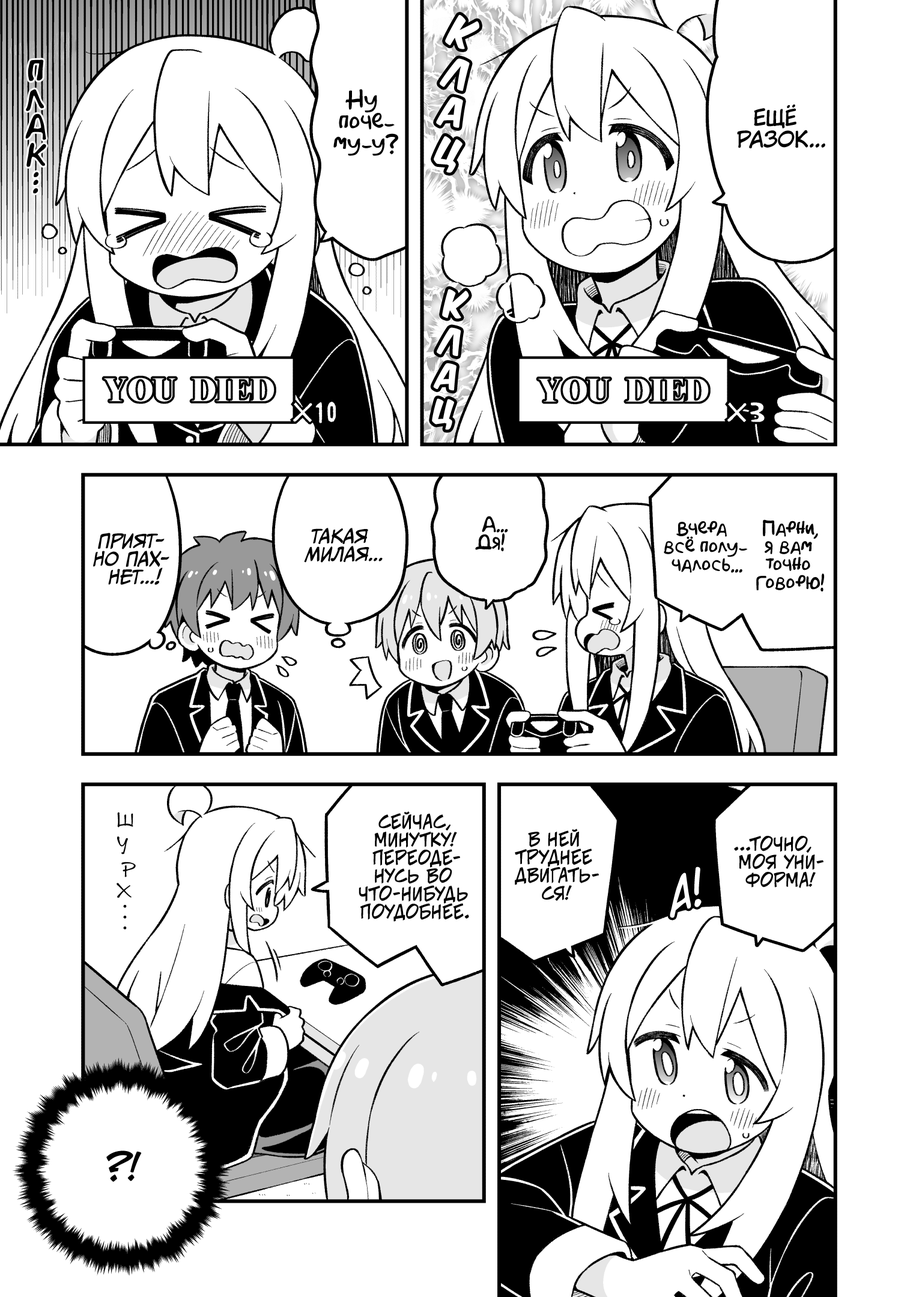
<style>
.page{position:relative;width:919px;height:1297px;background:#ffffff}
.page>*{position:absolute;margin:0}
.t1{font:36px "KomikaTitle-AxisRUS-LAT";color:#ffffff}
.t2{font:36px "AkbarPlain";color:#000000}
.t3{font:34.8px "KomikaTitle-AxisRUS-LAT";color:#ffffff}
.t4{font:21.6px "AkbarPlain";color:#000000}
.t5{font:33.6px "KomikaTitle-AxisRUS-LAT";color:#ffffff}
.t6{font:21.6px "KuraiVoice2";color:#000000;text-transform:uppercase}
.t7{font:32.4px "KomikaTitle-AxisRUS-LAT";color:#ffffff}
.t8{font:28.8px "AkbarPlain";color:#000000}
.t9{font:31.2px "KomikaTitle-AxisRUS-LAT";color:#ffffff}
.t10{font:30px "KomikaTitle-AxisRUS-LAT";color:#ffffff}
.t11{font:28.8px "KomikaTitle-AxisRUS-LAT";color:#ffffff}
.t12{font:18px "AkbarPlain";color:#000000}
.t13{font:18px "CCMeanwhile";color:#000000;text-transform:uppercase;font-style:italic}
.t14{font:21.6px "DSNote";color:#000000}
.t15{font:18px "v_CCJeffCampbell";color:#000000;text-transform:uppercase}
.t16{font:43.2px "v_CCDearDiary";color:#ffffff}
.t17{font:18px "DSNote";color:#000000}
.t18{font:36px "v_CCJeffCampbell";color:#000000;text-transform:uppercase}
</style>
<div class="page">
<p class="t1" style="left:445px;top:14px;width:34px;height:35px;rotate:21deg">к</p>
<p class="t2" style="left:28px;top:59px;width:16px;height:22px">п</p>
<p class="t3" style="left:440px;top:58px;width:30px;height:33px;rotate:12deg">л</p>
<p class="t2" style="left:26px;top:89px;width:18px;height:22px">л</p>
<p class="t4" style="left:333px;top:89px;width:65px;height:67px;text-align:center">Ну<br>поче-<br>му-у?</p>
<p class="t5" style="left:436px;top:97px;width:27px;height:31px;rotate:7deg">а</p>
<p class="t2" style="left:25px;top:114px;width:21px;height:26px">а</p>
<p class="t6" style="left:737px;top:105px;width:88px;height:43px;text-align:center">Ещё<br>разок...</p>
<p class="t7" style="left:434px;top:136px;width:29px;height:37px;rotate:15deg">ц</p>
<p class="t2" style="left:26px;top:143px;width:20px;height:24px">к</p>
<p class="t8" style="left:34px;top:172px;width:5px;height:5px">.</p>
<p class="t8" style="left:33px;top:180px;width:5px;height:5px">.</p>
<p class="t8" style="left:33px;top:188px;width:5px;height:5px">.</p>
<p class="t7" style="left:442px;top:289px;width:27px;height:30px;rotate:6deg">к</p>
<p class="t9" style="left:437px;top:327px;width:24px;height:29px;rotate:5deg">л</p>
<p class="t10" style="left:433px;top:363px;width:24px;height:28px;rotate:4deg">а</p>
<p class="t11" style="left:432px;top:398px;width:22px;height:32px;rotate:3deg">ц</p>
<p class="t12" style="left:475px;top:516px;width:33px;height:35px;text-align:center">А...<br>Дя!</p>
<p class="t12" style="left:664px;top:521px;width:84px;height:52px;text-align:center">Вчера<br>всё полу-<br>чалось...</p>
<p class="t12" style="left:756px;top:520px;width:69px;height:72px;text-align:center">Парни,<br>я вам<br>точно<br>говорю!</p>
<p class="t13" style="left:93px;top:533px;width:76px;height:52px;text-align:center">Прият-<br>но пах-<br>нет...!</p>
<p class="t13" style="left:304px;top:528px;width:79px;height:35px;text-align:center">Такая<br>милая...</p>
<p class="t14" style="left:117px;top:812px;width:16px;height:16px">ш</p>
<p class="t15" style="left:359px;top:812px;width:110px;height:110px;text-align:center">Сейчас,<br>минутку!<br>Переоде-<br>нусь во<br>что-нибудь<br>поудобнее.</p>
<p class="t15" style="left:515px;top:829px;width:84px;height:72px;text-align:center">В ней<br>труднее<br>двигать-<br>ся!</p>
<p class="t14" style="left:117px;top:837px;width:11px;height:18px">у</p>
<p class="t15" style="left:734px;top:836px;width:90px;height:52px;text-align:center">...Точно,<br>моя уни-<br>форма!</p>
<p class="t14" style="left:121px;top:862px;width:15px;height:16px">р</p>
<p class="t16" style="left:670px;top:867px;width:32px;height:51px;rotate:-20deg">А!</p>
<p class="t14" style="left:117px;top:883px;width:15px;height:15px">х</p>
<p class="t17" style="left:123px;top:905px;width:4px;height:3px">.</p>
<p class="t17" style="left:123px;top:916px;width:4px;height:3px">.</p>
<p class="t17" style="left:123px;top:927px;width:4px;height:3px">.</p>
<p class="t18" style="left:106px;top:1151px;width:36px;height:31px">?!</p>
</div>
